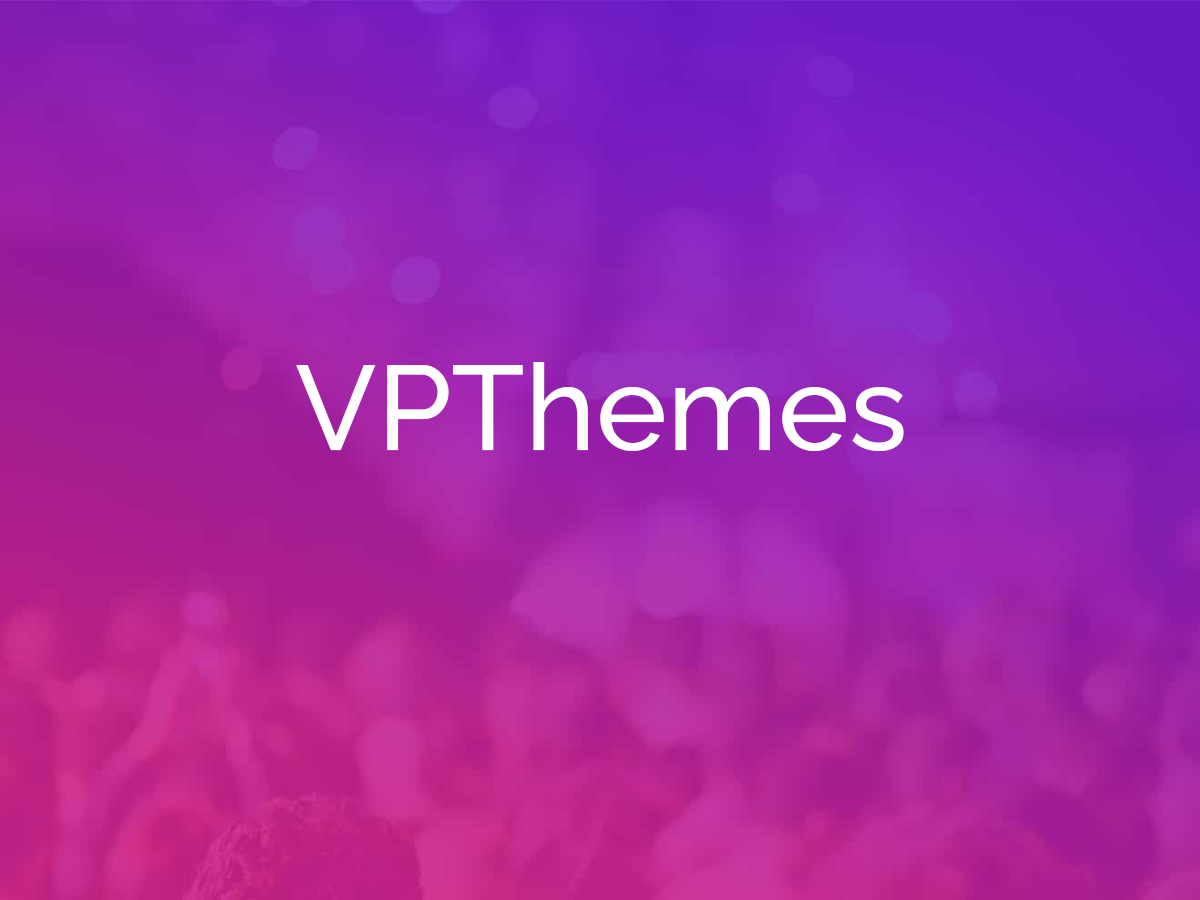
<style>
.page{position:relative;width:1200px;height:900px}
.page>*{position:absolute;margin:0}
.t1{font:120px "Raleway-Medium";color:#ffffff}
</style>
<div class="page">
<p class="t1" style="left:296px;top:362px;width:608px;height:89px">VPThemes</p>
</div>
